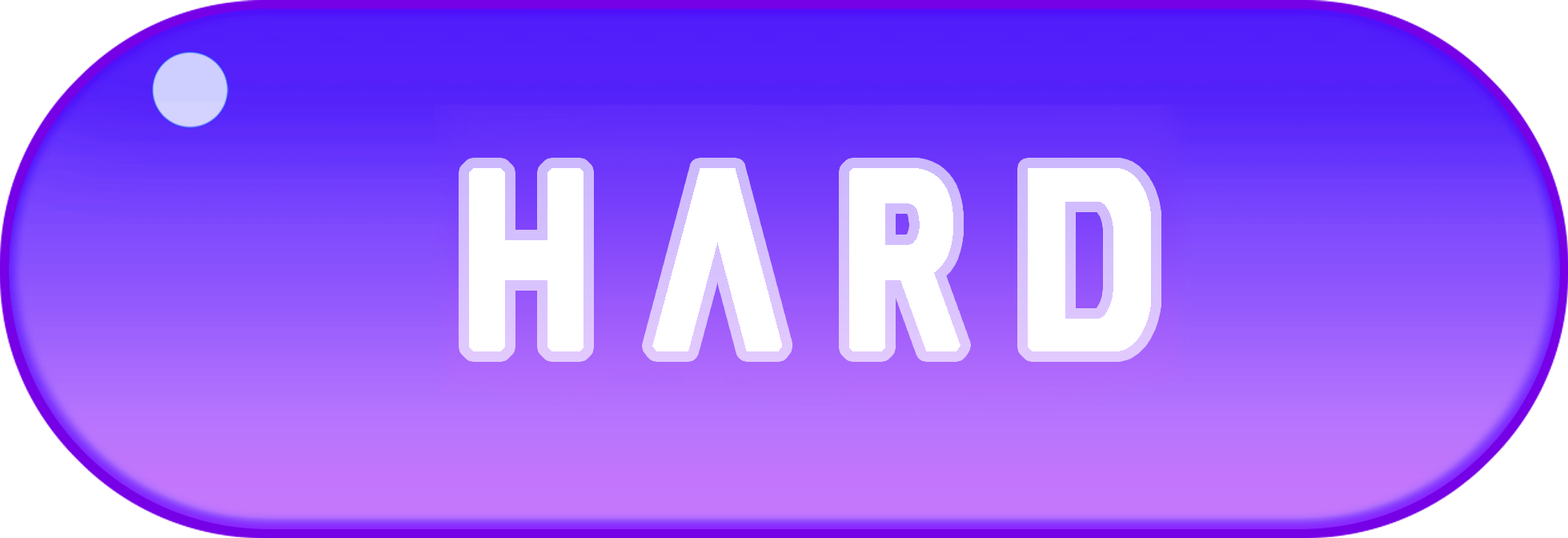
<style>
.page{position:relative;width:1568px;height:538px}
.page>*{position:absolute;margin:0}
.t1{font:217.8px "GAMECUBENDualSet";letter-spacing:0.2em;color:#ffffff;font-weight:bold;scale:0.85 1}
</style>
<div class="page">
<p class="t1" style="left:469px;top:168px;width:682px;height:183px">hard</p>
</div>
